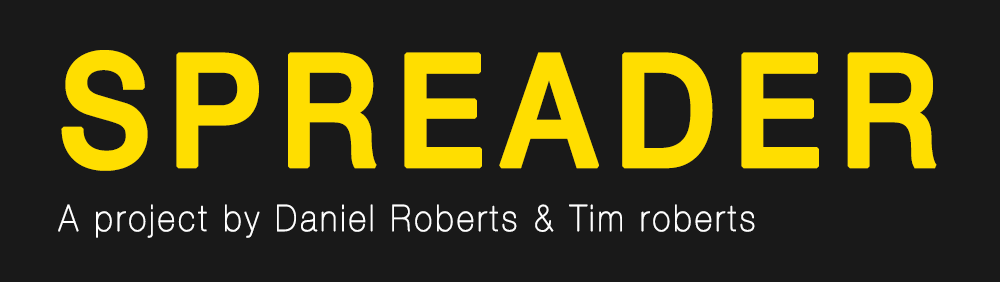
<style>
.page{position:relative;width:1000px;height:282px;background:#191919}
.page>*{position:absolute;margin:0}
.t1{font:156px "HelveticaNeue-Medium";letter-spacing:0.1em;color:#ffde00;font-weight:bold;scale:0.9 1}
.t2{font:36px "HelveticaNeue-UltraLight";letter-spacing:0.1em;color:#fefefe;font-weight:bold;scale:0.9 1}
</style>
<div class="page">
<p class="t1" style="left:61px;top:50px;width:876px;height:121px">SPREADER</p>
<p class="t2" style="left:58px;top:204px;width:697px;height:34px">A project by Daniel Roberts &amp; Tim roberts</p>
</div>
